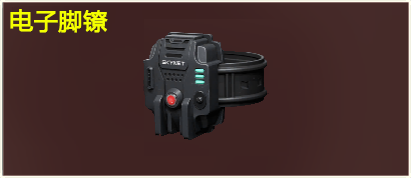
<style>
.page{position:relative;width:411px;height:178px}
.page>*{position:absolute;margin:0}
.t1{font:24px "MicrosoftYaHeiUI";color:#f4ff00;font-weight:bold}
</style>
<div class="page">
<p class="t1" style="left:10px;top:9px;width:98px;height:24px">电子脚镣</p>
</div>
